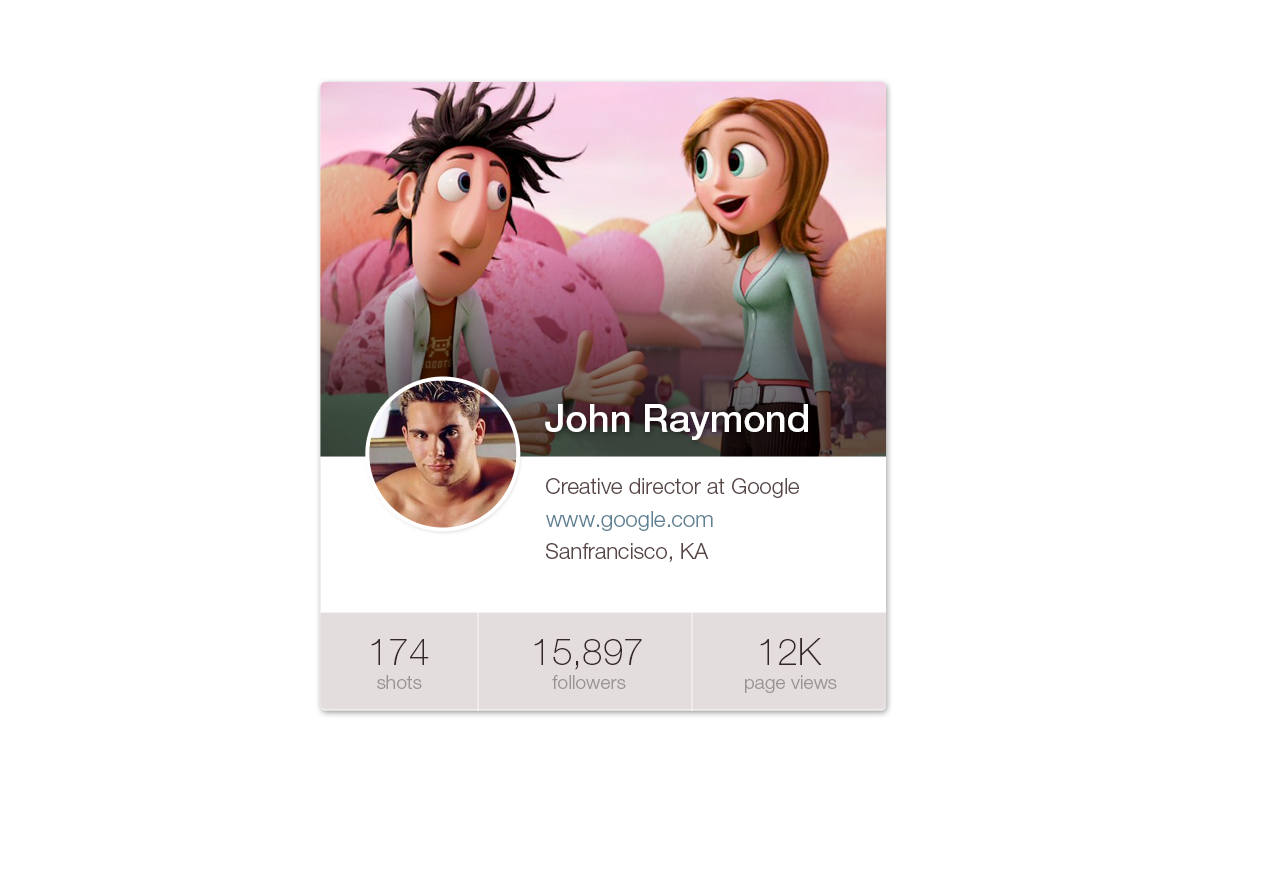
<style>
.page{position:relative;width:1280px;height:894px;background:#ffffff}
.page>*{position:absolute;margin:0}
.t1{font:38px "HelveticaNeueLTStd-Md";color:#ffffff}
.t2{font:22px "HelveticaNeueLTStd-Lt";color:#584646}
.t3{font:22px "HelveticaNeueLTStd-Lt";color:#608192}
.t4{font:36.8px "HelveticaNeueLTStd-Th";color:#342727}
.t5{font:19.3px "HelveticaNeueLTStd-Lt";color:#989494}
</style>
<div class="page">
<p class="t1" style="left:545px;top:404px;width:263px;height:36px">John Raymond</p>
<p class="t2" style="left:546px;top:478px;width:253px;height:20px">Creative director at Google</p>
<p class="t3" style="left:546px;top:511px;width:167px;height:20px">www.google.com</p>
<p class="t2" style="left:546px;top:543px;width:163px;height:19px">Sanfrancisco, KA</p>
<p class="t4" style="left:371px;top:639px;width:58px;height:26px">174</p>
<p class="t4" style="left:534px;top:639px;width:108px;height:31px">15,897</p>
<p class="t4" style="left:760px;top:638px;width:62px;height:27px">12K</p>
<p class="t5" style="left:377px;top:675px;width:45px;height:14px">shots</p>
<p class="t5" style="left:552px;top:675px;width:74px;height:14px">followers</p>
<p class="t5" style="left:745px;top:675px;width:92px;height:18px">page views</p>
</div>
